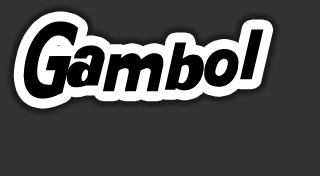
<style>
.page{position:relative;width:320px;height:176px;background:#333333}
.page>*{position:absolute;margin:0}
.t1{font:65px "KittyKatt";color:#000000}
</style>
<div class="page">
<p class="t1" style="left:23px;top:21px;width:241px;height:78px">Gambol</p>
</div>
